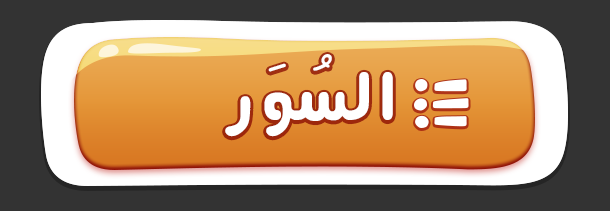
<style>
.page{position:relative;width:610px;height:211px;background:#333333}
.page>*{position:absolute;margin:0}
.t1{font:72px "ANegaar-Bold";letter-spacing:0.05em;color:#ffffff}
</style>
<div class="page">
<p class="t1" style="left:225px;top:54px;width:168px;height:83px">السُوَر</p>
</div>
